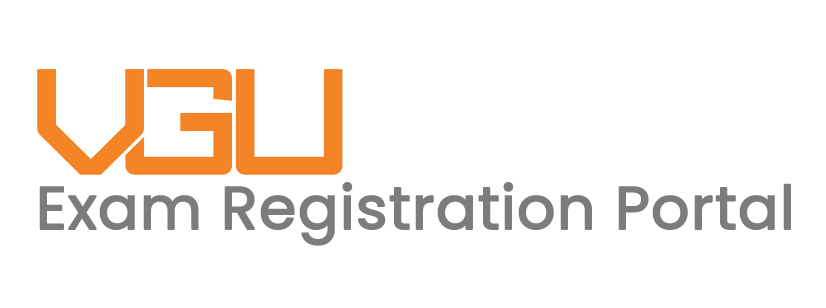
<style>
.page{position:relative;width:826px;height:308px;background:#ffffff}
.page>*{position:absolute;margin:0}
.t1{font:60px "SVN-Poppins";color:#7c7c7c;font-weight:bold}
</style>
<div class="page">
<p class="t1" style="left:39px;top:182px;width:752px;height:64px">Exam Registration Portal</p>
</div>
